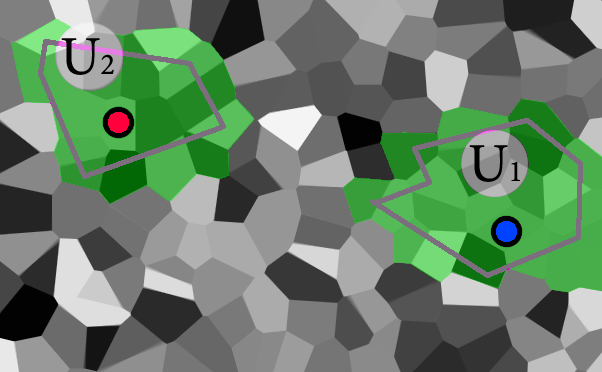
<style>
.page{position:relative;width:602px;height:372px}
.page>*{position:absolute;margin:0}
.t1{font:55px "MinionPro-Regular";color:#000000}
.t2{font:30px "MinionPro-Regular";color:#000000}
</style>
<div class="page">
<p class="t1" style="left:61px;top:38px;width:53px;height:37px">U<span class="t2">2</span></p>
<p class="t1" style="left:469px;top:145px;width:51px;height:37px">U<span class="t2">1</span></p>
</div>
